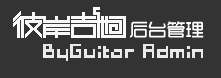
<style>
.page{position:relative;width:221px;height:78px;background:#333333}
.page>*{position:absolute;margin:0}
.t1{font:19px "TRENDS";color:#ffffff}
.t2{font:23px "04b03b";letter-spacing:-0.02em;color:#ffffff}
</style>
<div class="page">
<p class="t1" style="left:130px;top:21px;width:74px;height:17px">后台管理</p>
<p class="t2" style="left:43px;top:44px;width:160px;height:17px">ByGuitar Admin</p>
</div>
